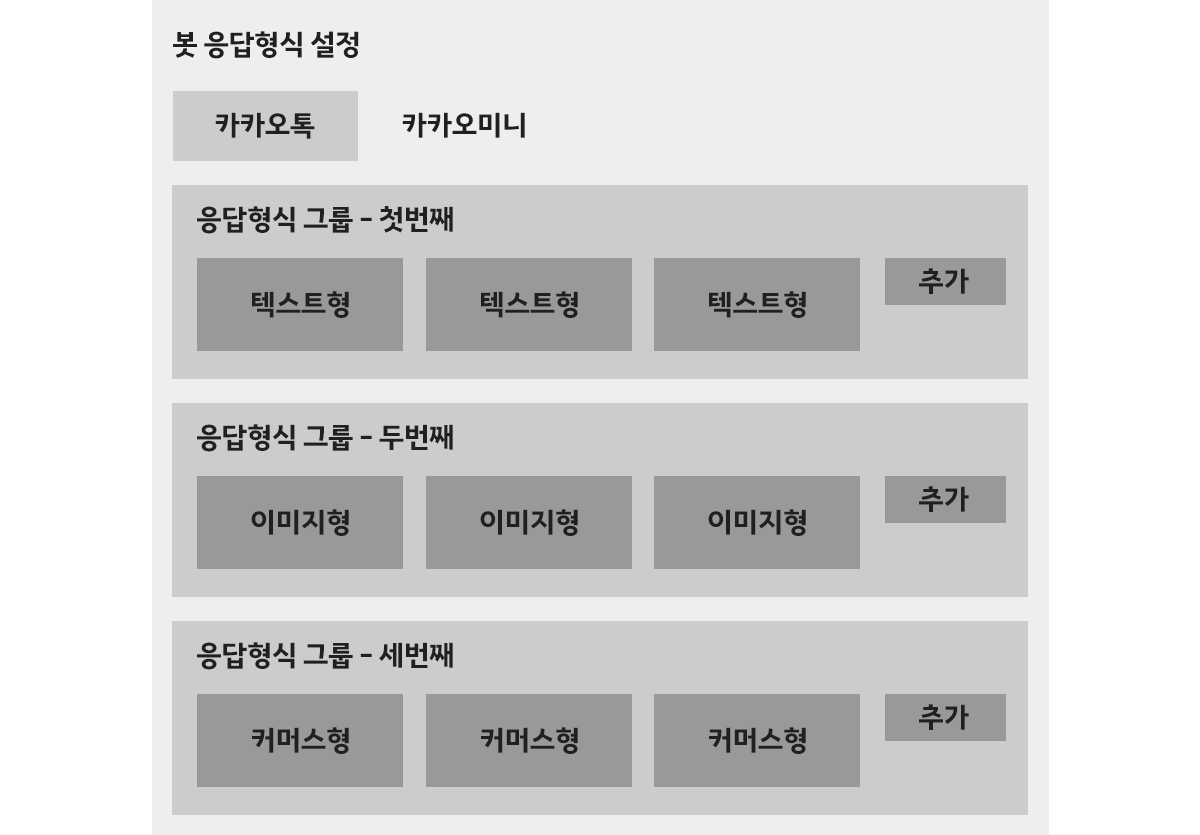
<style>
.page{position:relative;width:1200px;height:835px;background:#cccccc}
.page>*{position:absolute;margin:0}
.t1{font:30px "KakaoBold";color:#202020}
</style>
<div class="page">
<p class="t1" style="left:173px;top:31px;width:186px;height:28px">봇 응답형식 설정</p>
<p class="t1" style="left:215px;top:112px;width:100px;height:27px">카카오톡</p>
<p class="t1" style="left:402px;top:112px;width:123px;height:26px">카카오미니</p>
<p class="t1" style="left:197px;top:206px;width:256px;height:28px">응답형식 그룹 - 첫번째</p>
<p class="t1" style="left:919px;top:268px;width:50px;height:26px">추가</p>
<p class="t1" style="left:252px;top:291px;width:97px;height:27px">텍스트형</p>
<p class="t1" style="left:481px;top:291px;width:97px;height:27px">텍스트형</p>
<p class="t1" style="left:709px;top:291px;width:97px;height:27px">텍스트형</p>
<p class="t1" style="left:197px;top:424px;width:256px;height:28px">응답형식 그룹 - 두번째</p>
<p class="t1" style="left:919px;top:486px;width:50px;height:26px">추가</p>
<p class="t1" style="left:251px;top:509px;width:98px;height:27px">이미지형</p>
<p class="t1" style="left:480px;top:509px;width:98px;height:27px">이미지형</p>
<p class="t1" style="left:708px;top:509px;width:98px;height:27px">이미지형</p>
<p class="t1" style="left:197px;top:642px;width:256px;height:28px">응답형식 그룹 - 세번째</p>
<p class="t1" style="left:919px;top:704px;width:50px;height:26px">추가</p>
<p class="t1" style="left:252px;top:727px;width:97px;height:27px">커머스형</p>
<p class="t1" style="left:481px;top:727px;width:97px;height:27px">커머스형</p>
<p class="t1" style="left:709px;top:727px;width:97px;height:27px">커머스형</p>
</div>
